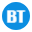
<style>
.page{position:relative;width:32px;height:32px;background:#ffffff}
.page>*{position:absolute;margin:0}
.t1{font:16px "Impact";scale:1.34 1}
</style>
<div class="page">
<p class="t1" style="left:6px;top:10px;width:11px;height:13px">B</p>
<p class="t1" style="left:16px;top:10px;width:10px;height:13px">T</p>
</div>
